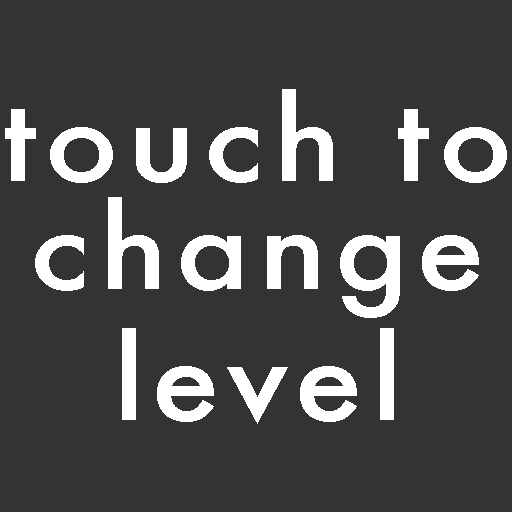
<style>
.page{position:relative;width:512px;height:512px;background:#333333}
.page>*{position:absolute;margin:0}
.t1{font:111.2px/126px "Futura-Medium";letter-spacing:0.06em;color:#ffffff;scale:1.12 1}
.t2{font:111.2px/108px "Futura-Medium";letter-spacing:0.06em;color:#ffffff;scale:1.12 1}
.t3{font:111.2px/131px "Futura-Medium";letter-spacing:0.06em;color:#ffffff;scale:1.12 1}
</style>
<div class="page">
<p class="t1" style="left:5px;top:89px;width:502px;height:335px;text-align:center">touch to<br><span class="t2">change<br></span><span class="t3">level</span></p>
</div>
